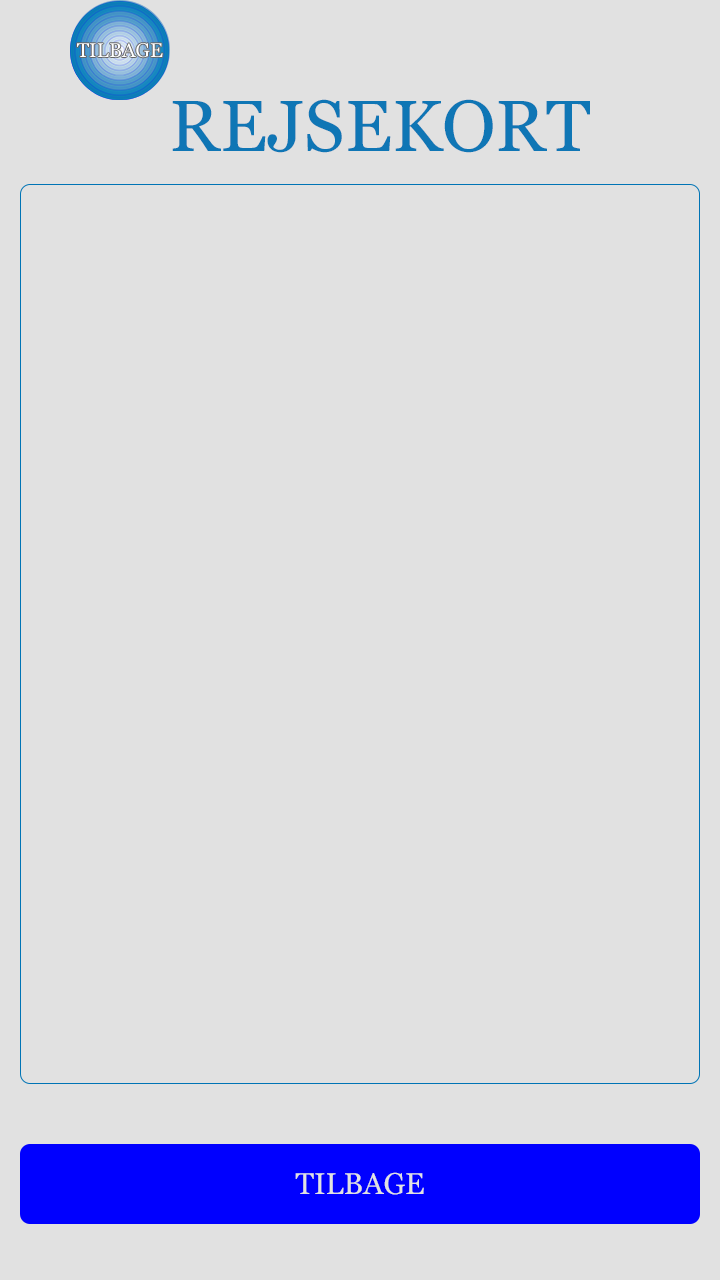
<style>
.page{position:relative;width:720px;height:1280px;background:#e1e1e1}
.page>*{position:absolute;margin:0}
.t1{font:72px "Georgia";color:#0f76b5}
.t2{font:30px "Georgia";color:#e1e1e1}
</style>
<div class="page">
<p class="t1" style="left:172px;top:99px;width:418px;height:54px">REJSEKORT</p>
<p class="t2" style="left:295px;top:1172px;width:129px;height:23px">TILBAGE</p>
</div>
